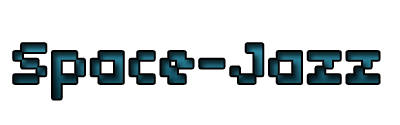
<style>
.page{position:relative;width:400px;height:125px;background:#ffffff}
.page>*{position:absolute;margin:0}
.t1{font:62px "04b03"}
</style>
<div class="page">
<p class="t1" style="left:14px;top:44px;width:365px;height:55px">Space-Jazz</p>
</div>
